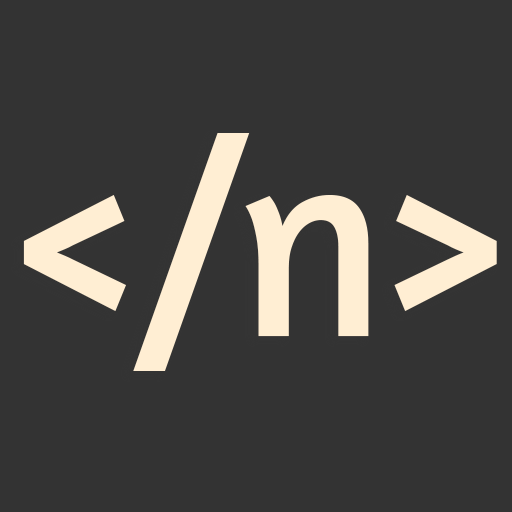
<style>
.page{position:relative;width:512px;height:512px;background:#333333}
.page>*{position:absolute;margin:0}
.t1{font:278.8px "Amaranth-Regular";color:#ffeed3;scale:0.95 1}
</style>
<div class="page">
<p class="t1" style="left:23px;top:133px;width:474px;height:238px">&lt;/n&gt;</p>
</div>
